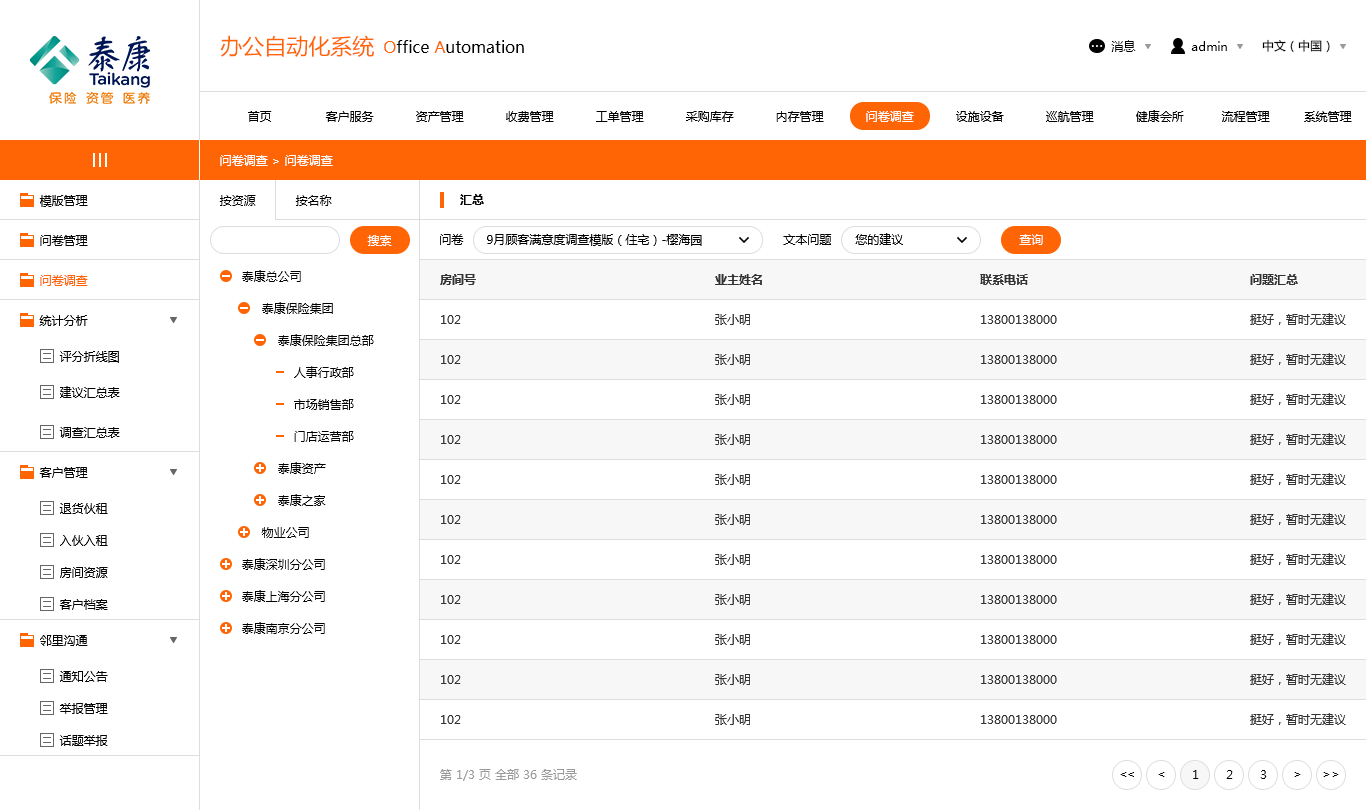
<style>
.page{position:relative;width:1366px;height:810px;background:#ffffff}
.page>*{position:absolute;margin:0}
.t1{font:22px "MicrosoftYaHei";color:#ff6405}
.t2{font:16px "MicrosoftYaHei";color:#000000}
.t3{font:16px "MicrosoftYaHei";color:#ff6405}
.t4{font:12px "MicrosoftYaHei";color:#010101}
.t5{font:12px "MicrosoftYaHei";color:#000000}
.t6{font:12px "MicrosoftYaHei";color:#ffffff}
.t7{font:12px "MicrosoftYaHei-Bold";color:#000000}
.t8{font:12px/32px "MicrosoftYaHei";color:#000000}
.t9{font:12px "MicrosoftYaHei";color:#ff6405}
.t10{font:12px/40px "MicrosoftYaHei";color:#333333}
.t11{font:12px/40px "MicrosoftYaHei-Bold";color:#333333}
.t12{font:12px "MicrosoftYaHei";color:#999999}
.t13{font:12px "MicrosoftYaHei";letter-spacing:-0.1em;color:#000000}
</style>
<div class="page">
<p class="t1" style="left:220px;top:35px;width:154px;height:22px">办公自动化系统</p>
<p class="t2" style="left:384px;top:40px;width:140px;height:13px"><span class="t3">O</span>ffice<span class="t3"> A</span>utomation</p>
<p class="t4" style="left:1111px;top:40px;width:25px;height:12px">消息</p>
<p class="t5" style="left:1191px;top:41px;width:36px;height:10px">admin</p>
<p class="t5" style="left:1262px;top:39px;width:68px;height:14px">中文（中国）</p>
<p class="t5" style="left:248px;top:111px;width:24px;height:11px">首页</p>
<p class="t5" style="left:325px;top:111px;width:49px;height:11px">客户服务</p>
<p class="t5" style="left:416px;top:111px;width:48px;height:11px">资产管理</p>
<p class="t5" style="left:506px;top:111px;width:48px;height:11px">收费管理</p>
<p class="t5" style="left:596px;top:111px;width:48px;height:11px">工单管理</p>
<p class="t5" style="left:686px;top:111px;width:48px;height:11px">采购库存</p>
<p class="t5" style="left:776px;top:111px;width:48px;height:11px">内存管理</p>
<p class="t6" style="left:866px;top:111px;width:48px;height:11px">问卷调查</p>
<p class="t5" style="left:956px;top:111px;width:48px;height:11px">设施设备</p>
<p class="t5" style="left:1046px;top:111px;width:48px;height:11px">巡航管理</p>
<p class="t5" style="left:1136px;top:110px;width:48px;height:12px">健康会所</p>
<p class="t5" style="left:1221px;top:111px;width:49px;height:11px">流程管理</p>
<p class="t5" style="left:1304px;top:111px;width:48px;height:11px">系统管理</p>
<p class="t6" style="left:220px;top:155px;width:113px;height:11px">问卷调查 &gt; 问卷调查</p>
<p class="t5" style="left:39px;top:195px;width:49px;height:12px">模版管理</p>
<p class="t5" style="left:219px;top:195px;width:37px;height:11px">按资源</p>
<p class="t4" style="left:295px;top:195px;width:37px;height:11px">按名称</p>
<p class="t7" style="left:460px;top:194px;width:24px;height:11px">汇总</p>
<p class="t5" style="left:855px;top:233px;width:48px;height:12px">您的建议</p>
<p class="t5" style="left:40px;top:235px;width:48px;height:11px">问卷管理</p>
<p class="t6" style="left:367px;top:235px;width:25px;height:11px">搜索</p>
<p class="t5" style="left:440px;top:234px;width:24px;height:11px">问卷</p>
<p class="t5" style="left:487px;top:234px;width:215px;height:12px">9月顾客满意度调查模版（住宅）-樱海园</p>
<p class="t5" style="left:783px;top:234px;width:49px;height:11px">文本问题</p>
<p class="t6" style="left:1019px;top:234px;width:24px;height:11px">查询</p>
<p class="t8" style="left:242px;top:270px;width:132px;height:364px">泰康总公司<br>     泰康保险集团 <br>         泰康保险集团总部<br>             人事行政部<br>             市场销售部<br>             门店运营部<br>         泰康资产<br>         泰康之家<br>     物业公司<br>泰康深圳分公司<br>泰康上海分公司<br>泰康南京分公司</p>
<p class="t9" style="left:40px;top:275px;width:48px;height:11px">问卷调查</p>
<p class="t10" style="left:440px;top:274px;width:36px;height:450px"><span class="t11">房间号<br></span>102<br>102<br>102<br>102<br>102<br>102<br>102<br>102<br>102<br>102<br>102</p>
<p class="t10" style="left:715px;top:274px;width:47px;height:451px"><span class="t11">业主姓名<br></span>张小明<br>张小明<br>张小明<br>张小明<br>张小明<br>张小明<br>张小明<br>张小明<br>张小明<br>张小明<br>张小明</p>
<p class="t10" style="left:980px;top:274px;width:77px;height:450px"><span class="t11">联系电话<br></span>13800138000<br>13800138000<br>13800138000<br>13800138000<br>13800138000<br>13800138000<br>13800138000<br>13800138000<br>13800138000<br>13800138000<br>13800138000</p>
<p class="t10" style="left:1250px;top:274px;width:96px;height:451px"><span class="t11">问题汇总</span><br>挺好，暂时无建议<br>挺好，暂时无建议<br>挺好，暂时无建议<br>挺好，暂时无建议<br>挺好，暂时无建议<br>挺好，暂时无建议<br>挺好，暂时无建议<br>挺好，暂时无建议<br>挺好，暂时无建议<br>挺好，暂时无建议<br>挺好，暂时无建议</p>
<p class="t5" style="left:39px;top:315px;width:49px;height:11px">统计分析</p>
<p class="t5" style="left:59px;top:351px;width:60px;height:12px">评分折线图</p>
<p class="t5" style="left:60px;top:386px;width:60px;height:12px">建议汇总表</p>
<p class="t5" style="left:59px;top:427px;width:61px;height:11px">调查汇总表</p>
<p class="t5" style="left:39px;top:467px;width:49px;height:11px">客户管理</p>
<p class="t5" style="left:59px;top:503px;width:49px;height:11px">退货伙租</p>
<p class="t5" style="left:60px;top:535px;width:48px;height:11px">入伙入租</p>
<p class="t5" style="left:60px;top:567px;width:48px;height:11px">房间资源</p>
<p class="t5" style="left:59px;top:599px;width:49px;height:11px">客户档案</p>
<p class="t5" style="left:40px;top:635px;width:48px;height:11px">邻里沟通</p>
<p class="t5" style="left:59px;top:671px;width:49px;height:11px">通知公告</p>
<p class="t5" style="left:59px;top:703px;width:49px;height:11px">举报管理</p>
<p class="t5" style="left:59px;top:735px;width:49px;height:11px">话题举报</p>
<p class="t12" style="left:440px;top:769px;width:137px;height:12px">第 1/3 页 全部 36 条记录</p>
<p class="t13" style="left:1120px;top:772px;width:14px;height:5px">&lt;&lt;</p>
<p class="t5" style="left:1158px;top:772px;width:7px;height:5px">&lt;</p>
<p class="t5" style="left:1193px;top:770px;width:6px;height:9px">1</p>
<p class="t5" style="left:1226px;top:770px;width:7px;height:9px">2</p>
<p class="t5" style="left:1260px;top:770px;width:7px;height:9px">3</p>
<p class="t5" style="left:1294px;top:772px;width:7px;height:5px">&gt;</p>
<p class="t5" style="left:1323px;top:772px;width:16px;height:5px">&gt;&gt;</p>
</div>
